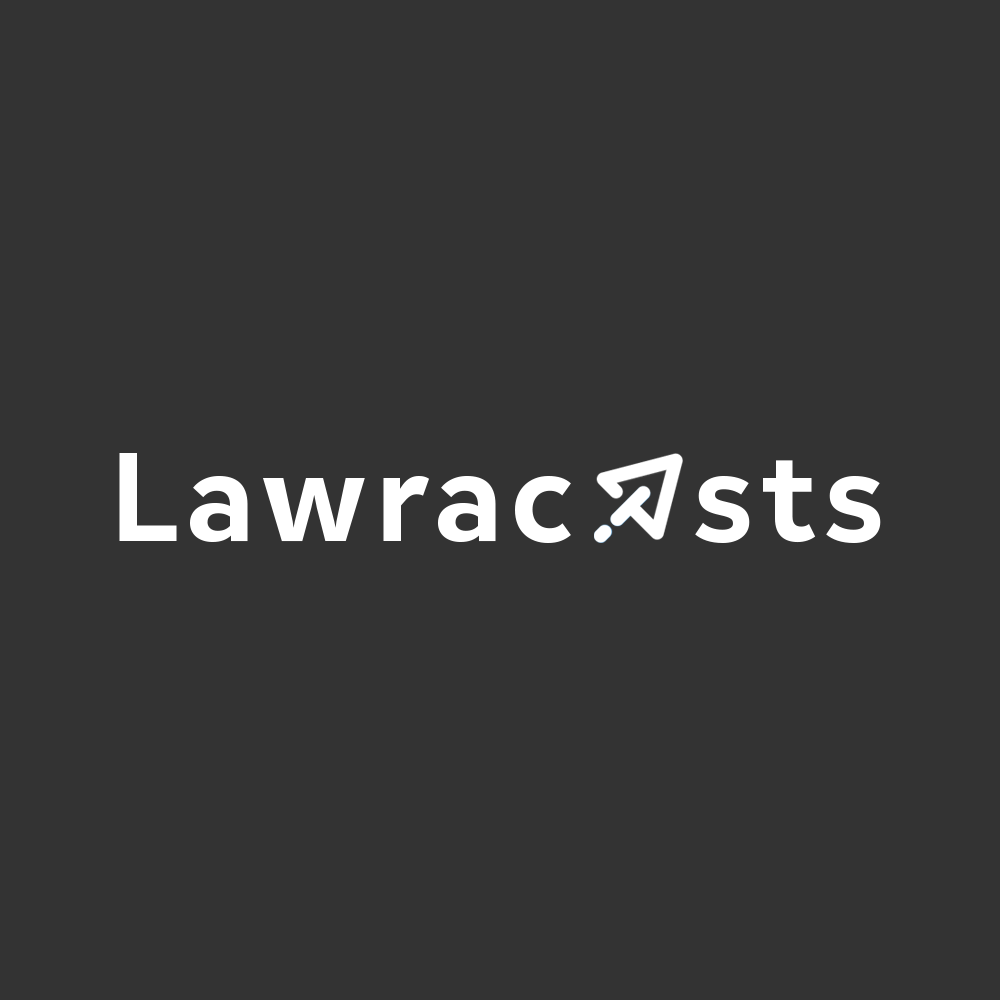
<style>
.page{position:relative;width:1000px;height:1000px;background:#333333}
.page>*{position:absolute;margin:0}
.t1{font:125px "FONTSPRINGDEMO-InterSansBoldRegular";letter-spacing:0.06em;color:#ffffff}
</style>
<div class="page">
<p class="t1" style="left:119px;top:453px;width:762px;height:90px">Lawrac   sts</p>
</div>
